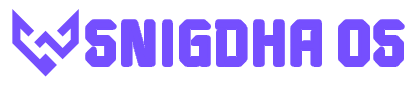
<style>
.page{position:relative;width:415px;height:86px;background:#ffffff}
.page>*{position:absolute;margin:0}
.t1{font:60.3px "Iceberg-Regular";color:#754ffe}
</style>
<div class="page">
<p class="t1" style="left:88px;top:22px;width:315px;height:42px">SNIGDHA OS</p>
</div>
